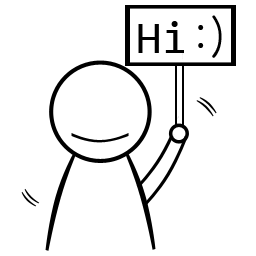
<style>
.page{position:relative;width:256px;height:256px;background:#ffffff}
.page>*{position:absolute;margin:0}
.t1{font:46px "Consolas";color:#000000}
.t2{font:46px "Gulim";color:#000000}
</style>
<div class="page">
<p class="t1" style="left:138px;top:15px;width:84px;height:43px">Hi <span class="t2">:)</span></p>
</div>
